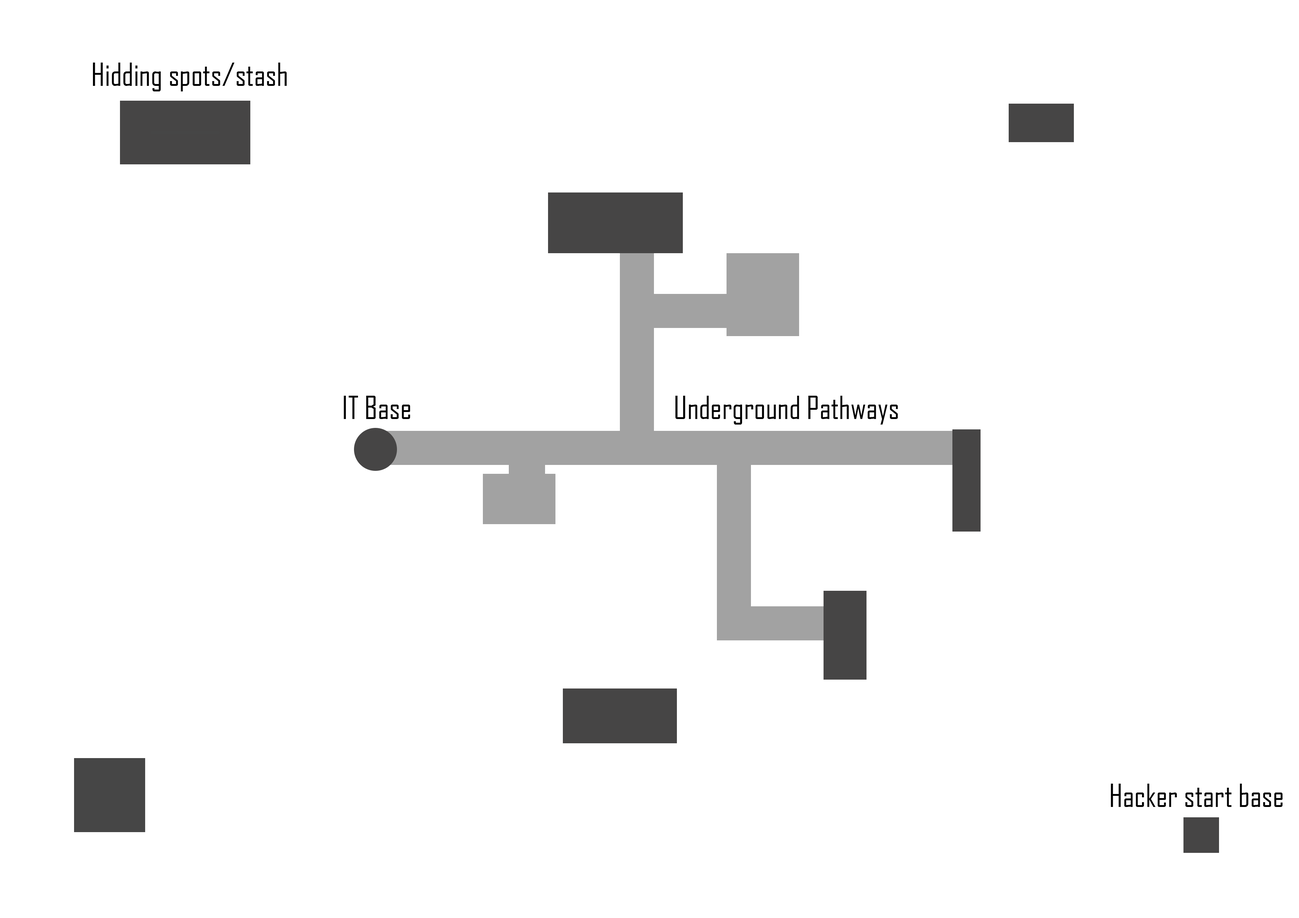
<style>
.page{position:relative;width:1299px;height:918px;background:#ffffff}
.page>*{position:absolute;margin:0}
.t1{font:30.9px "AgencyFB-Reg";color:#000000}
</style>
<div class="page">
<p class="t1" style="left:93px;top:63px;width:194px;height:28px">Hidding spots/stash</p>
<p class="t1" style="left:344px;top:396px;width:66px;height:23px">IT Base</p>
<p class="t1" style="left:675px;top:396px;width:223px;height:29px">Underground Pathways</p>
<p class="t1" style="left:1111px;top:784px;width:171px;height:23px">Hacker start base</p>
</div>
